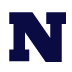
<style>
.page{position:relative;width:72px;height:72px;background:#ffffff}
.page>*{position:absolute;margin:0}
.t1{font:72px "Rockwell-ExtraBold";color:#0b0b44}
</style>
<div class="page">
<p class="t1" style="left:9px;top:12px;width:57px;height:50px">N</p>
</div>
